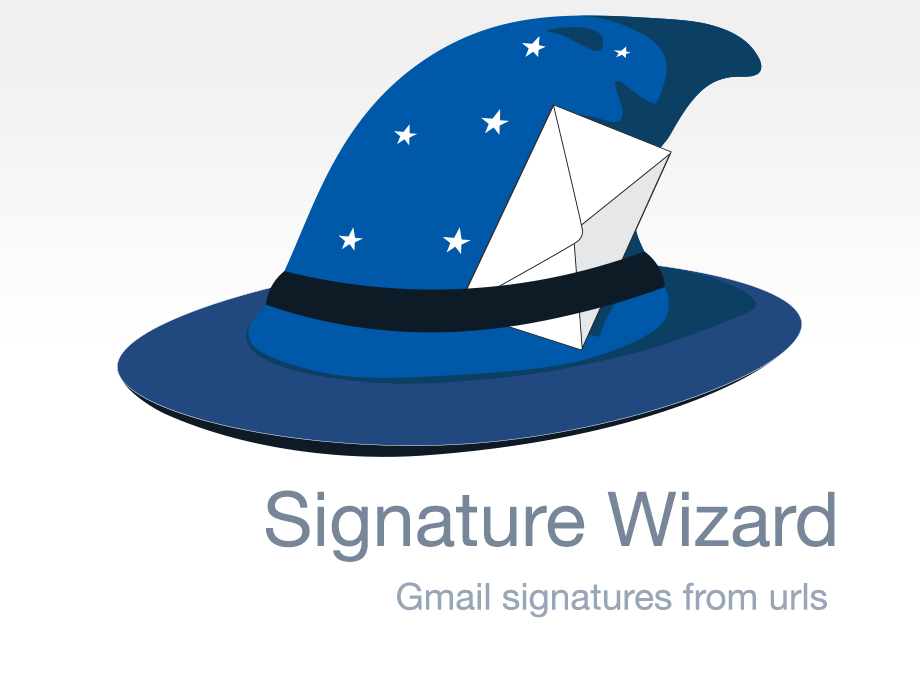
<style>
.page{position:relative;width:920px;height:680px;background:#ffffff}
.page>*{position:absolute;margin:0}
.t1{font:75.7px "HelveticaNeue";color:#778698}
.t2{font:37px "HelveticaNeue";color:#98a6b8}
</style>
<div class="page">
<p class="t1" style="left:266px;top:490px;width:569px;height:72px">Signature Wizard</p>
<p class="t2" style="left:397px;top:582px;width:430px;height:36px">Gmail signatures from urls</p>
</div>
